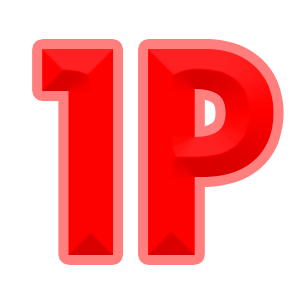
<style>
.page{position:relative;width:300px;height:300px;background:#ffffff}
.page>*{position:absolute;margin:0}
.t1{font:316px "TwCenMT-CondensedExtraBold";letter-spacing:-0.12em;color:#ff0000}
</style>
<div class="page">
<p class="t1" style="left:42px;top:49px;width:232px;height:206px">1P</p>
</div>
